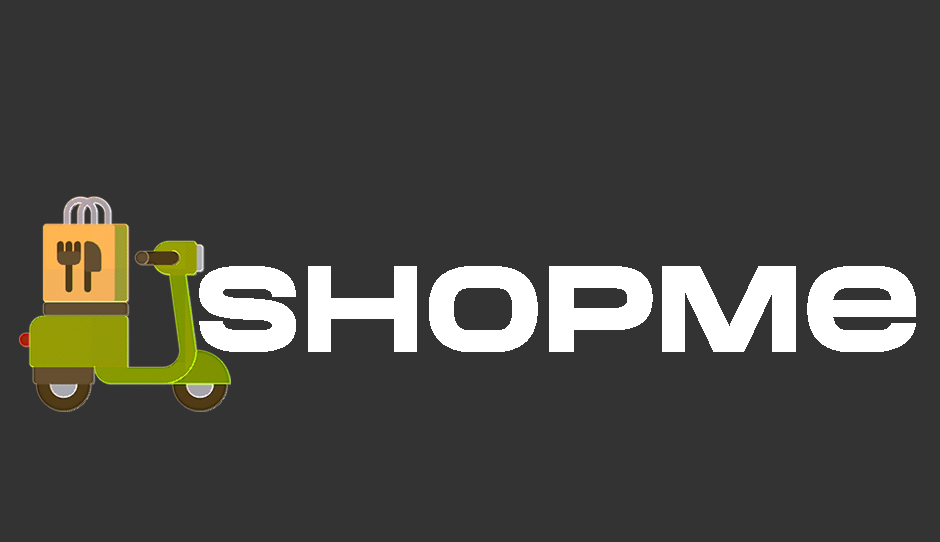
<style>
.page{position:relative;width:940px;height:542px;background:#333333}
.page>*{position:absolute;margin:0}
.t1{font:118.9px "Mortend-Bold";color:#ffffff;font-weight:bold}
</style>
<div class="page">
<p class="t1" style="left:199px;top:266px;width:717px;height:86px">ShopMe</p>
</div>
